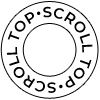
<style>
.page{position:relative;width:100px;height:100px;background:#ffffff}
.page>*{position:absolute;margin:0}
.t1{font:14.7px "Montserrat-SemiBold";color:#000000}
.t2{font:20.4px "Montserrat-SemiBold";color:#000000}
</style>
<div class="page">
<p class="t1" style="left:6px;top:6px;width:87px;height:87px;text-align:center">SCROLL TOP<span class="t2">·</span>SCROLL TOP<span class="t2">·</span></p>
</div>
